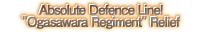
<style>
.page{position:relative;width:201px;height:32px;background:#ffffff}
.page>*{position:absolute;margin:0}
.t1{font:13px/12px "FutoGoB101Pr5-Bold";letter-spacing:-0.08em;font-weight:bold}
.t2{font:13px/12px "FutoGoB101Pr5-Bold";letter-spacing:-0.08em;color:#7f6951;font-weight:bold}
</style>
<div class="page">
<p class="t1" style="left:21px;top:3px;width:158px;height:25px;text-align:center">Absolute Defence Line!<br>"Ogasawara Regiment" Relief</p>
<p class="t2" style="left:22px;top:4px;width:158px;height:25px;text-align:center">Absolute Defence Line!<br>"Ogasawara Regiment" Relief</p>
</div>
